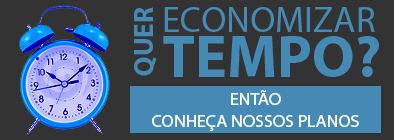
<style>
.page{position:relative;width:394px;height:140px;background:#333333}
.page>*{position:absolute;margin:0}
.t1{font:28px "MyriadPro-Bold";color:#4589b5}
.t2{font:35.9px "MyriadPro-Regular";color:#4589b5}
.t3{font:59.9px "MyriadPro-Bold";color:#4589b5}
.t4{font:17.9px "MyriadPro-Regular";color:#ffffff}
</style>
<div class="page">
<p class="t1" style="left:134px;top:7px;width:23px;height:69px;rotate:-90deg">QUER</p>
<p class="t2" style="left:164px;top:7px;width:211px;height:25px">ECONOMIZAR</p>
<p class="t3" style="left:163px;top:36px;width:216px;height:41px">TEMPO?</p>
<p class="t4" style="left:152px;top:90px;width:207px;height:41px;text-align:center">ENTÃO<br>CONHEÇA NOSSOS PLANOS</p>
</div>
